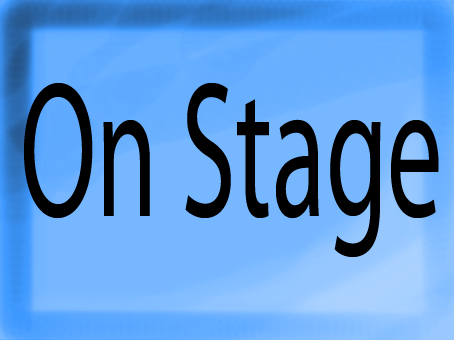
<style>
.page{position:relative;width:454px;height:340px;background:#76b7ff}
.page>*{position:absolute;margin:0}
.t1{font:194.6px "MyriadPro-Regular";color:#000000;scale:0.57 1}
</style>
<div class="page">
<p class="t1" style="left:24px;top:83px;width:415px;height:174px">On Stage</p>
</div>
